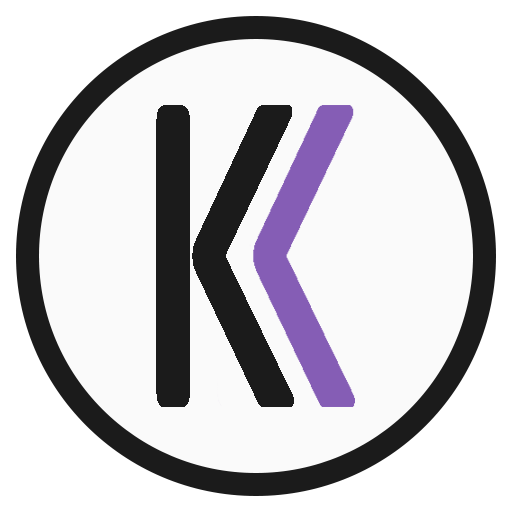
<style>
.page{position:relative;width:512px;height:512px;background:#fafafa}
.page>*{position:absolute;margin:0}
.t1{font:759.9px "Mitr-Regular";letter-spacing:0.02em;color:#1b1b1b;scale:0.57 1}
</style>
<div class="page">
<p class="t1" style="left:156px;top:105px;width:138px;height:302px">K</p>
</div>
